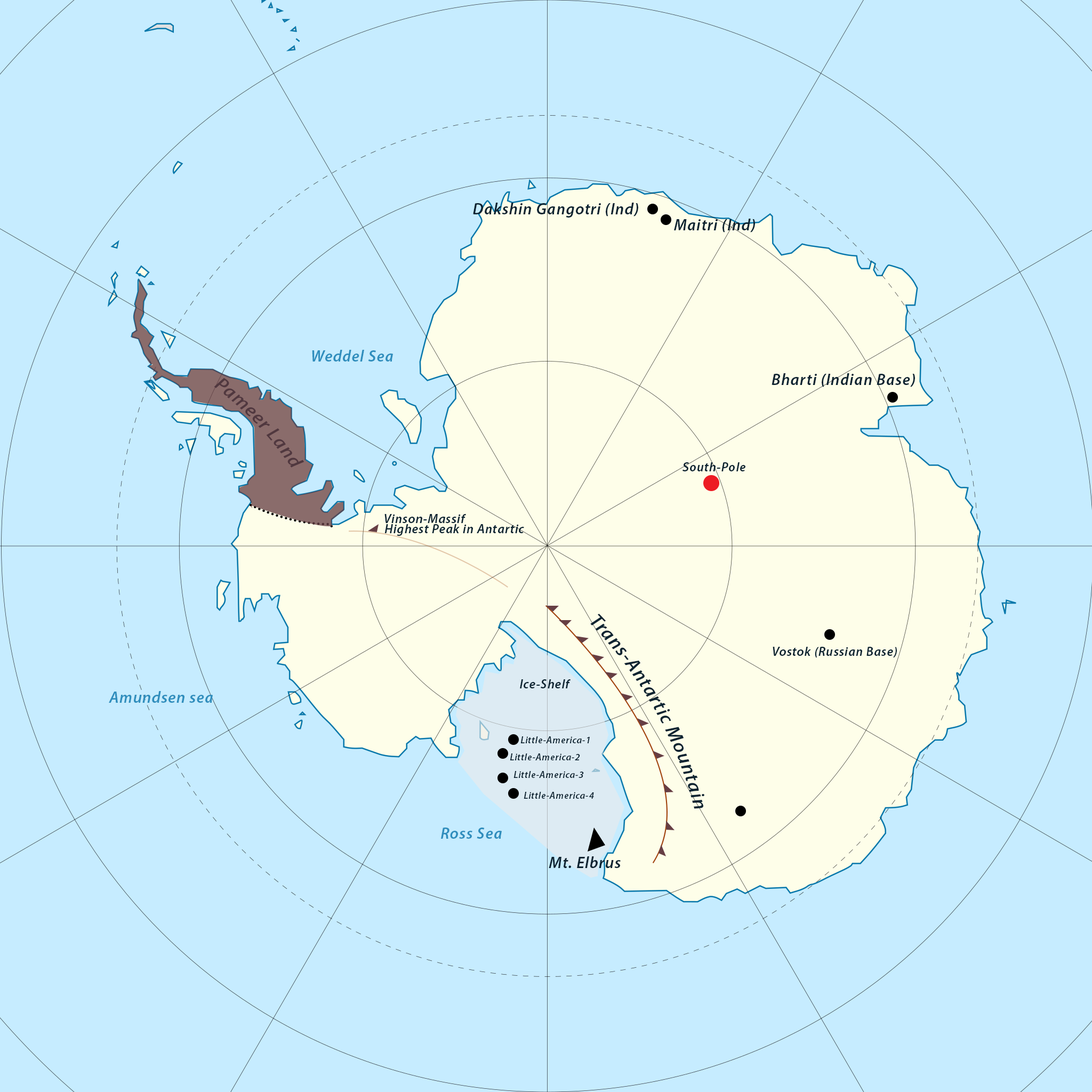
<style>
.page{position:relative;width:1092px;height:1092px;background:#c6ecff}
.page>*{position:absolute;margin:0}
.t1{font:16px "MyriadPro-SemiboldIt";letter-spacing:0.04em;color:#0c2331}
.t2{font:16px "MyriadPro-SemiboldIt";letter-spacing:0.04em;color:#2f8ebd}
.t3{font:19.2px "MyriadPro-SemiboldIt";letter-spacing:0.04em;color:#50383f}
.t4{font:12.8px "MyriadPro-SemiboldIt";letter-spacing:0.04em;color:#0c2331}
.t5{font:19.2px "MyriadPro-SemiboldIt";letter-spacing:0.04em;color:#0c2331}
.t6{font:9.6px "MyriadPro-SemiboldIt";letter-spacing:0.04em;color:#0c2331}
</style>
<div class="page">
<p class="t1" style="left:473px;top:203px;width:165px;height:15px">Dakshin Gangotri (Ind)</p>
<p class="t1" style="left:674px;top:219px;width:81px;height:13px">Maitri (Ind)</p>
<p class="t2" style="left:312px;top:350px;width:81px;height:12px">Weddel Sea</p>
<p class="t3" style="left:214px;top:378px;width:90px;height:90px;rotate:46deg">Pameer Land</p>
<p class="t1" style="left:772px;top:373px;width:143px;height:14px">Bharti (Indian Base)</p>
<p class="t4" style="left:682px;top:462px;width:63px;height:9px">South-Pole</p>
<p class="t4" style="left:384px;top:514px;width:82px;height:9px">Vinson-Massif</p>
<p class="t4" style="left:384px;top:524px;width:140px;height:12px">Highest Peak in Antartic</p>
<p class="t5" style="left:590px;top:614px;width:114px;height:195px;rotate:61deg">Trans-Antartic Mountain</p>
<p class="t4" style="left:773px;top:647px;width:124px;height:10px">Vostok (Russian Base)</p>
<p class="t4" style="left:520px;top:679px;width:51px;height:9px">Ice-Shelf</p>
<p class="t2" style="left:109px;top:691px;width:104px;height:12px">Amundsen sea</p>
<p class="t6" style="left:520px;top:736px;width:70px;height:7px">Little-America-1</p>
<p class="t6" style="left:510px;top:753px;width:70px;height:7px">Little-America-2</p>
<p class="t6" style="left:513px;top:771px;width:71px;height:7px">Little-America-3</p>
<p class="t6" style="left:524px;top:792px;width:70px;height:7px">Little-America-4</p>
<p class="t2" style="left:441px;top:828px;width:61px;height:11px">Ross Sea</p>
<p class="t1" style="left:549px;top:856px;width:72px;height:12px">Mt. Elbrus</p>
</div>
